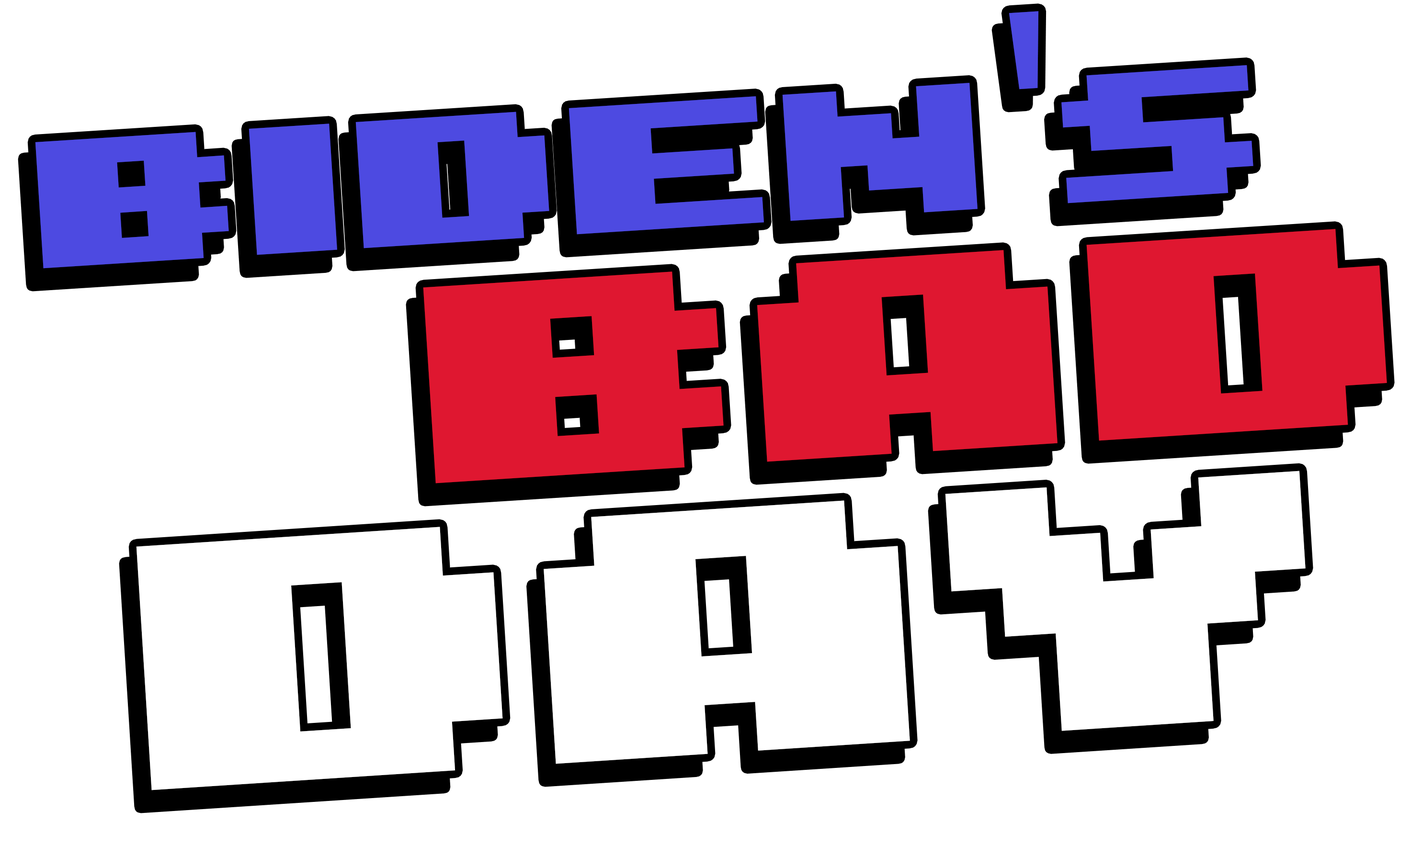
<style>
.page{position:relative;width:1411px;height:845px;background:#ffffff}
.page>*{position:absolute;margin:0}
.t1{font:404.3px "8-bit-Arcade-In";color:#4d4ae1;scale:1.06 1}
.t2{font:319px "MyriadPro-Regular";color:#4d4ae1;scale:1.06 1}
.t3{font:627.8px "8-bit-Arcade-In";color:#df1730;scale:1.06 1}
.t4{font:780.8px "8-bit-Arcade-In";color:#ffffff;scale:1.04 1}
</style>
<div class="page">
<p class="t1" style="left:35px;top:11px;width:1218px;height:258px;rotate:-4deg">biden<span class="t2">'</span>s</p>
<p class="t3" style="left:423px;top:229px;width:964px;height:255px;rotate:-4deg">bad</p>
<p class="t4" style="left:136px;top:471px;width:1169px;height:320px;rotate:-4deg">day</p>
</div>
